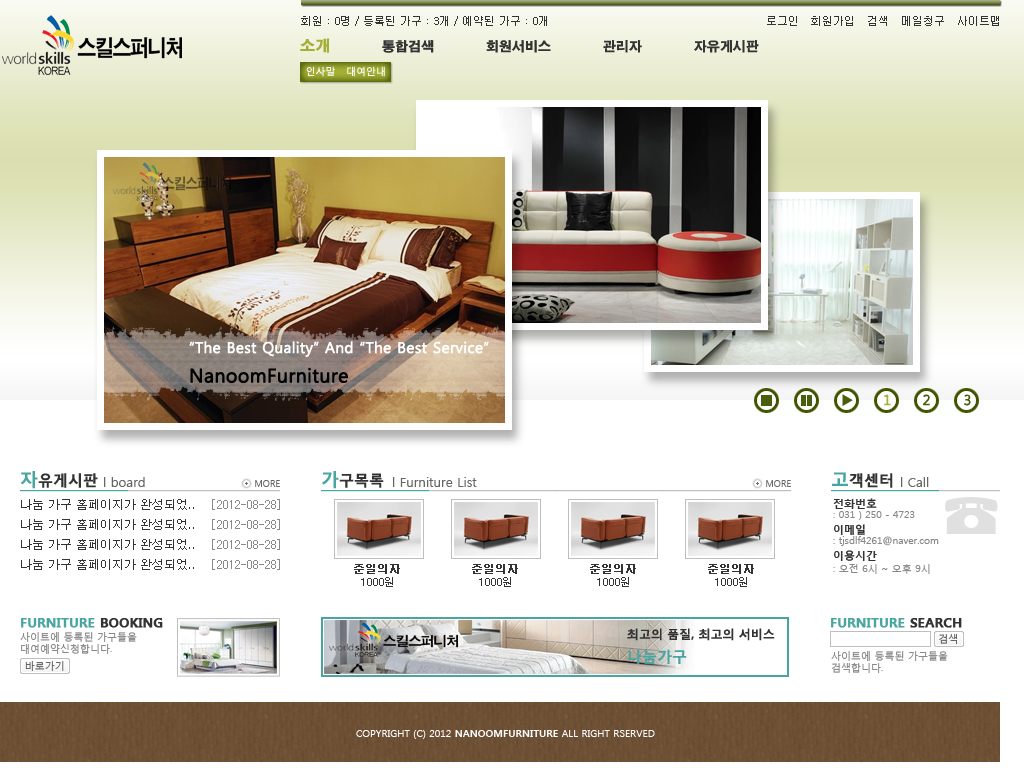
<style>
.page{position:relative;width:1024px;height:768px;background:#ffffff}
.page>*{position:absolute;margin:0}
.t1{font:11px "Dotum";color:#333333}
.t2{font:13px "H2gtrE";color:#333333}
.t3{font:15px "H2gtrE";color:#a5af36}
.t4{font:10px "MalgunGothicRegular";color:#ffffff}
.t5{font:14px "MalgunGothicRegular";color:#a5af36;font-weight:bold}
.t6{font:14px "MalgunGothicRegular";color:#4b5e0e;font-weight:bold}
.t7{font:15px "MalgunGothicBold";color:#333333}
.t8{font:18px "MalgunGothicBold";color:#49a5a0}
.t9{font:13px "MalgunGothicRegular";color:#666666}
.t10{font:12px/20px "Dotum";color:#333333}
.t11{font:12px/20px "Dotum";color:#888888}
.t12{font:10px/14px "MalgunGothicRegular";color:#888888}
.t13{font:11px/12px "MalgunGothicBold";color:#333333;text-transform:uppercase}
.t14{font:10px/14px "MalgunGothicRegular";color:#888888;text-transform:uppercase}
.t15{font:11px/14px "MalgunGothicBold";color:#333333}
.t16{font:10px/12px "MalgunGothicRegular";color:#888888}
.t17{font:11px/13px "Dotum";color:#333333}
.t18{font:11px/13px "Dotum";color:#333333;font-weight:bold}
.t19{font:10px/12px "MalgunGothicRegular";color:#888888;text-transform:uppercase}
.t20{font:13px/15px "MalgunGothicBold";color:#49a5a0;text-transform:uppercase;font-weight:bold}
.t21{font:13px/15px "MalgunGothicBold";color:#333333;text-transform:uppercase;font-weight:bold}
.t22{font:12px "MalgunGothicBold";color:#333333}
.t23{font:15px "MalgunGothicBold";color:#49a5a0}
.t24{font:13px "MalgunGothicBold";color:#49a5a0;text-transform:uppercase;font-weight:bold}
.t25{font:13px "MalgunGothicBold";color:#333333;text-transform:uppercase;font-weight:bold}
.t26{font:10px "MalgunGothicRegular";color:#666666;text-transform:uppercase}
</style>
<div class="page">
<p class="t1" style="left:301px;top:16px;width:246px;height:10px">회원 : 0명 / 등록된 가구 : 3개 / 예약된 가구 : 0개</p>
<p class="t1" style="left:767px;top:16px;width:232px;height:10px">로그인   회원가입   검색   메일청구   사이트맵</p>
<p class="t2" style="left:300px;top:38px;width:459px;height:15px"><span class="t3">소개</span>            통합검색            회원서비스            관리자            자유게시판</p>
<p class="t4" style="left:306px;top:66px;width:79px;height:11px">인사말   대여안내</p>
<p class="t5" style="left:884px;top:394px;width:7px;height:12px">1</p>
<p class="t6" style="left:923px;top:394px;width:7px;height:12px">2</p>
<p class="t6" style="left:964px;top:394px;width:7px;height:12px">3</p>
<p class="t7" style="left:20px;top:471px;width:78px;height:18px"><span class="t8">자</span>유게시판</p>
<p class="t7" style="left:322px;top:471px;width:62px;height:18px"><span class="t8">가</span>구목록</p>
<p class="t7" style="left:832px;top:472px;width:61px;height:16px"><span class="t8">고</span>객센터</p>
<p class="t9" style="left:104px;top:477px;width:41px;height:10px">l board</p>
<p class="t9" style="left:393px;top:477px;width:84px;height:10px">l Furniture List</p>
<p class="t9" style="left:901px;top:477px;width:28px;height:10px">l Call</p>
<p class="t10" style="left:21px;top:499px;width:173px;height:71px">나눔 가구 홈페이지가 완성되었..<br>나눔 가구 홈페이지가 완성되었..<br>나눔 가구 홈페이지가 완성되었..<br>나눔 가구 홈페이지가 완성되었..</p>
<p class="t11" style="left:212px;top:499px;width:68px;height:71px">[2012-08-28]<br>[2012-08-28]<br>[2012-08-28]<br>[2012-08-28]</p>
<p class="t12" style="left:833px;top:498px;width:106px;height:76px"><span class="t13">전화번호<br></span><span class="t14">: 031 ) 250 - 4723<br></span><span class="t13">이메일<br></span><span class="t14">: </span>tjsdlf4261@naver.com<br><span class="t15">이용시간<br></span><span class="t16">: 오전 6시 ~ 오후 9시</span></p>
<p class="t17" style="left:354px;top:564px;width:46px;height:23px;text-align:center"><span class="t18">준일의자<br></span>1000원</p>
<p class="t17" style="left:472px;top:564px;width:46px;height:23px;text-align:center"><span class="t18">준일의자<br></span>1000원</p>
<p class="t17" style="left:590px;top:564px;width:46px;height:23px;text-align:center"><span class="t18">준일의자<br></span>1000원</p>
<p class="t17" style="left:708px;top:564px;width:46px;height:23px;text-align:center"><span class="t18">준일의자<br></span>1000원</p>
<p class="t19" style="left:20px;top:618px;width:143px;height:36px"><span class="t20">furniture </span><span class="t21">booking<br></span>사이트에 등록된 가구들을<br>대여예약신청합니다.</p>
<p class="t22" style="left:627px;top:628px;width:148px;height:36px">최고의 품질, 최고의 서비스<br><span class="t23">나눔가구</span></p>
<p class="t24" style="left:831px;top:618px;width:131px;height:10px">furniture <span class="t25">Search</span></p>
<p class="t26" style="left:939px;top:634px;width:18px;height:10px">검색</p>
<p class="t19" style="left:831px;top:651px;width:117px;height:22px">사이트에 등록된 가구들을<br>검색합니다.</p>
<p class="t26" style="left:25px;top:661px;width:39px;height:10px">바로가기</p>
</div>
